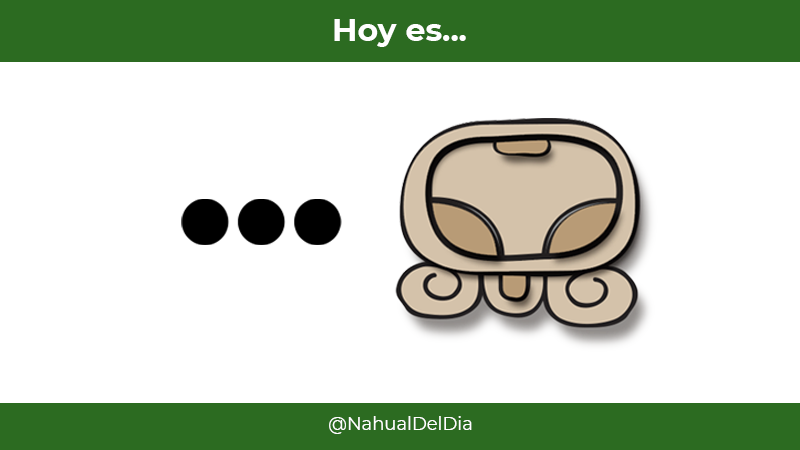
<style>
.page{position:relative;width:800px;height:450px;background:#ffffff}
.page>*{position:absolute;margin:0}
.t1{font:54.2px "Montserrat-Bold";color:#ffffff}
.t2{font:30.9px "Montserrat-Regular";color:#ffffff}
</style>
<div class="page">
<p class="t1" style="left:334px;top:19px;width:132px;height:28px">Hoy es...</p>
<p class="t2" style="left:329px;top:416px;width:143px;height:18px">@NahualDelDia</p>
</div>
